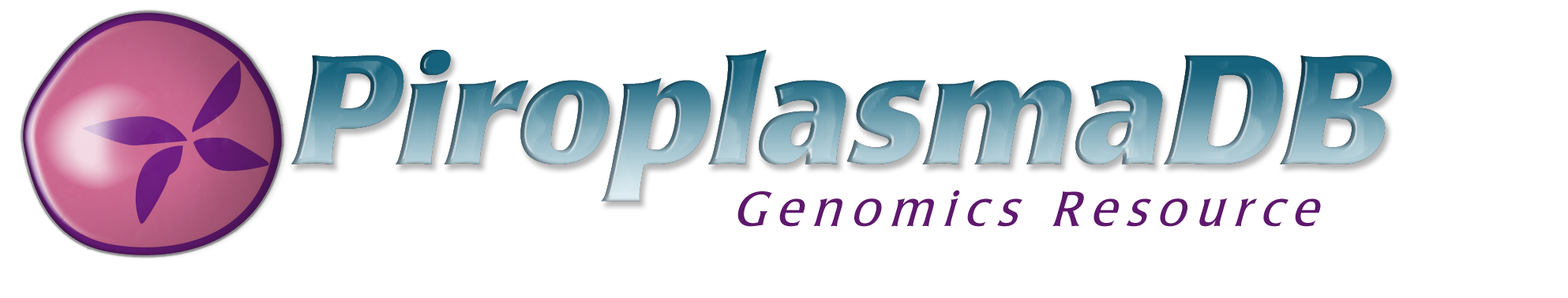
<style>
.page{position:relative;width:1568px;height:298px;background:#ffffff}
.page>*{position:absolute;margin:0}
.t1{font:157.9px "PopplLaudatio-Bold"}
.t2{font:50.2px "LaudatioC";letter-spacing:0.2em;color:#5e186d;scale:0.96 1}
</style>
<div class="page">
<p class="t1" style="left:291px;top:50px;width:1101px;height:151px">PiroplasmaDB</p>
<p class="t2" style="left:737px;top:189px;width:584px;height:38px">Genomics Resource</p>
</div>
